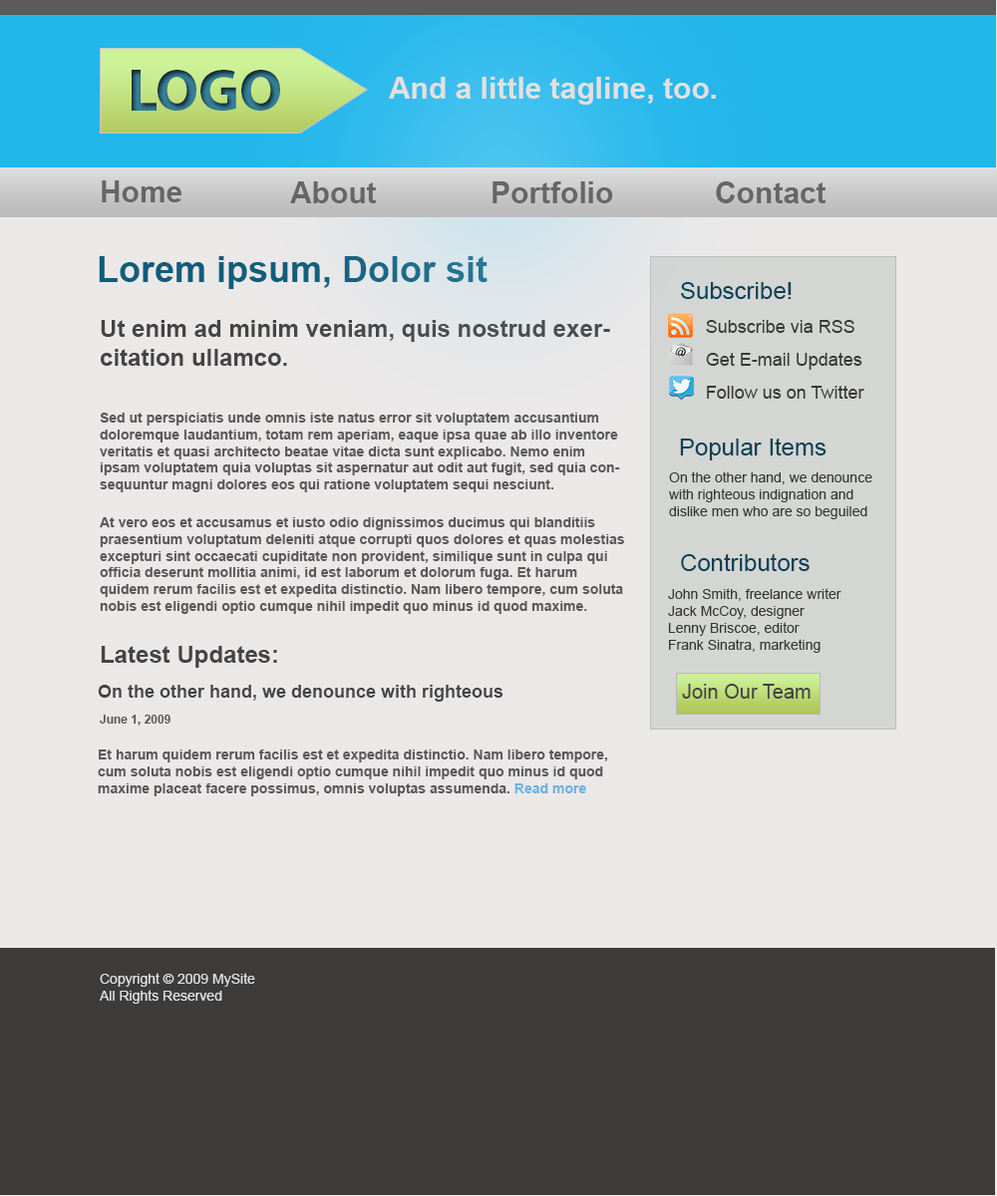
<style>
.page{position:relative;width:997px;height:1196px;background:#ebe8e8}
.page>*{position:absolute;margin:0}
.t1{font:59.8px "MyriadPro-Bold"}
.t2{font:29.9px "Arial-BoldMT";color:#e4dfdf}
.t3{font:29.9px "Arial-BoldMT";color:#676666}
.t4{font:35.9px "Arial-BoldMT";color:#0e5d7a}
.t5{font:23.9px "ArialMT";color:#044055}
.t6{font:23.9px "Arial-BoldMT";color:#444444}
.t7{font:17.9px "ArialMT";color:#373737}
.t8{font:14px "Arial-BoldMT";color:#595858}
.t9{font:14px "ArialMT";color:#373737}
.t10{font:17.9px "Arial-BoldMT";color:#444444}
.t11{font:19.9px "ArialMT";color:#434343}
.t12{font:12px "Arial-BoldMT";color:#595858}
.t13{font:14px "Arial-BoldMT";color:#6cb1e2}
.t14{font:14px "ArialMT";color:#e0e2e2}
</style>
<div class="page">
<p class="t1" style="left:132px;top:70px;width:148px;height:41px">LOGO</p>
<p class="t2" style="left:389px;top:77px;width:327px;height:28px">.And a little tagline, too</p>
<p class="t3" style="left:102px;top:180px;width:79px;height:22px">Home</p>
<p class="t3" style="left:290px;top:181px;width:87px;height:22px">About</p>
<p class="t3" style="left:492px;top:181px;width:121px;height:22px">Portfolio</p>
<p class="t3" style="left:716px;top:181px;width:110px;height:22px">Contact</p>
<p class="t4" style="left:99px;top:256px;width:388px;height:33px">Lorem ipsum, Dolor sit</p>
<p class="t5" style="left:681px;top:282px;width:110px;height:17px">Subscribe!</p>
<p class="t6" style="left:101px;top:320px;width:509px;height:46px">Ut enim ad minim veniam, quis nostrud exercitation ullamco.</p>
<p class="t7" style="left:706px;top:320px;width:148px;height:13px">Subscribe via RSS</p>
<p class="t7" style="left:706px;top:353px;width:156px;height:17px">Get E-mail Updates</p>
<p class="t7" style="left:707px;top:386px;width:157px;height:13px">Follow us on Twitter</p>
<p class="t8" style="left:100px;top:413px;width:520px;height:79px">Sed ut perspiciatis unde omnis iste natus error sit voluptatem accusantium doloremque laudantium, totam rem aperiam, eaque ipsa quae ab illo inventore veritatis et quasi architecto beatae vitae dicta sunt explicabo. Nemo enim ipsam voluptatem quia voluptas sit aspernatur aut odit aut fugit, sed quia consequuntur magni dolores eos qui ratione voluptatem sequi nesciunt.</p>
<p class="t5" style="left:680px;top:438px;width:146px;height:23px">Popular Items</p>
<p class="t9" style="left:669px;top:472px;width:203px;height:47px">On the other hand, we denounce with righteous indignation and dislike men who are so beguiled</p>
<p class="t8" style="left:100px;top:517px;width:524px;height:97px">At vero eos et accusamus et iusto odio dignissimos ducimus qui blanditiis praesentium voluptatum deleniti atque corrupti quos dolores et quas molestias excepturi sint occaecati cupiditate non provident, similique sunt in culpa qui officia deserunt mollitia animi, id est laborum et dolorum fuga. Et harum quidem rerum facilis est et expedita distinctio. Nam libero tempore, cum soluta nobis est eligendi optio cumque nihil impedit quo minus id quod maxime.</p>
<p class="t5" style="left:681px;top:553px;width:128px;height:18px">Contributors</p>
<p class="t9" style="left:668px;top:588px;width:173px;height:65px">John Smith, freelance writer<br>Jack McCoy, designer<br>Lenny Briscoe, editor<br>Frank Sinatra, marketing</p>
<p class="t6" style="left:101px;top:646px;width:176px;height:22px">Latest Updates:</p>
<p class="t10" style="left:98px;top:685px;width:405px;height:17px">On the other hand, we denounce with righteous</p>
<p class="t11" style="left:682px;top:684px;width:128px;height:15px">Join Our Team</p>
<p class="t12" style="left:100px;top:715px;width:70px;height:11px">June 1, 2009</p>
<p class="t8" style="left:98px;top:750px;width:509px;height:46px">Et harum quidem rerum facilis est et expedita distinctio. Nam libero tempore, cum soluta nobis est eligendi optio cumque nihil impedit quo minus id quod maxime placeat facere possimus, omnis voluptas assumenda. <span class="t13">Read more</span></p>
<p class="t14" style="left:100px;top:973px;width:155px;height:31px">Copyright © 2009 MySite<br>All Rights Reserved</p>
</div>
